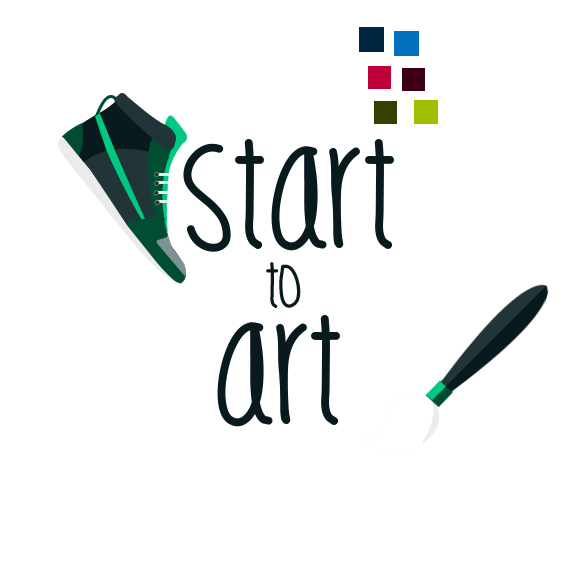
<style>
.page{position:relative;width:568px;height:568px;background:#ffffff}
.page>*{position:absolute;margin:0}
.t1{font:150px "LilTastyGoods";letter-spacing:0.01em;color:#081a1e}
.t2{font:62.5px "LilTastyGoods";letter-spacing:0.01em;color:#081a1e}
</style>
<div class="page">
<p class="t1" style="left:183px;top:139px;width:211px;height:113px">START</p>
<p class="t2" style="left:266px;top:262px;width:35px;height:46px">to</p>
<p class="t1" style="left:217px;top:315px;width:123px;height:112px">ART</p>
</div>
